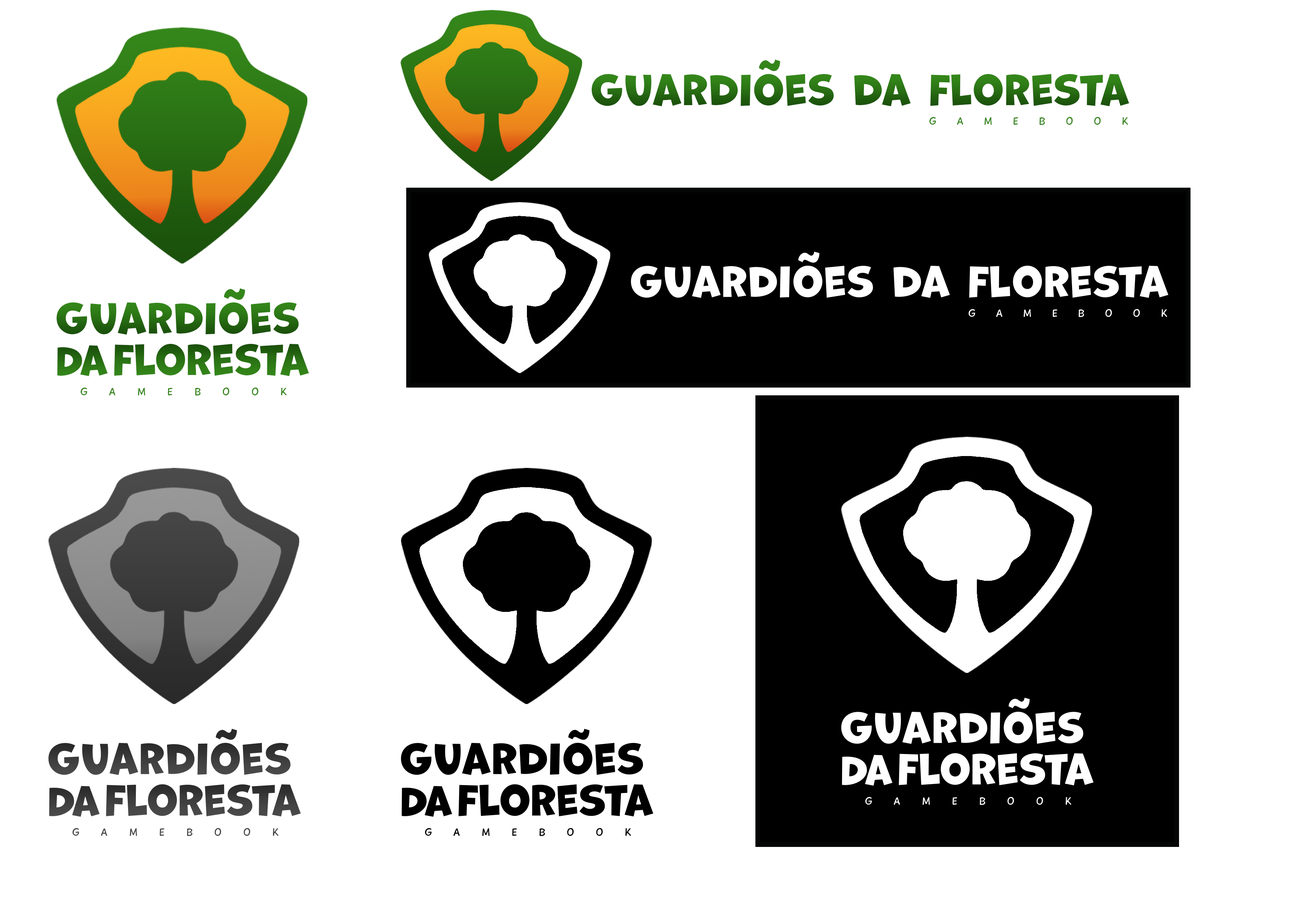
<style>
.page{position:relative;width:1299px;height:918px;background:#ffffff}
.page>*{position:absolute;margin:0}
.t1{font:39.6px "Marvin";letter-spacing:-0.001em;color:#34851a}
.t2{font:39.6px "Marvin";letter-spacing:0.03em;color:#276a12}
.t3{font:39.6px "Marvin";letter-spacing:0.019em;color:#276a12}
.t4{font:10.8px "PlaytimeWithHotToddies";letter-spacing:1.9em;color:#33851a}
.t5{font:6.7px "Venera900";letter-spacing:3.03em;color:#33851a}
.t6{font:39.6px "Marvin";letter-spacing:-0.001em;color:#34861a}
.t7{font:38px "Marvin";letter-spacing:-0.03em;color:#276a12}
.t8{font:39.6px "Marvin";letter-spacing:-0.001em;color:#276a12}
.t9{font:39.6px "Marvin";letter-spacing:0.02em;color:#276a12}
.t10{font:10.8px "PlaytimeWithHotToddies";letter-spacing:2em;color:#33851a}
.t11{font:6.8px "Venera900";letter-spacing:3.03em;color:#33851a}
</style>
<div class="page">
<p class="t1" style="left:759px;top:60px;width:21px;height:11px">~</p>
<p class="t2" style="left:591px;top:74px;width:538px;height:32px">Gua<span class="t3">rd</span>ioes da floresta</p>
<p class="t4" style="left:929px;top:117px;width:199px;height:8px"><span class="t5">  </span>GAMEBOOK</p>
<p class="t6" style="left:224px;top:288px;width:21px;height:12px">~</p>
<p class="t2" style="left:56px;top:302px;width:243px;height:33px">Gua<span class="t3">rd</span>ioes</p>
<p class="t7" style="left:57px;top:345px;width:51px;height:31px">Da</p>
<p class="t8" style="left:114px;top:344px;width:195px;height:32px">Flo<span class="t9">res</span><span class="t3">ta</span></p>
<p class="t10" style="left:80px;top:388px;width:207px;height:8px"><span class="t11">  </span>GAMEBOOK</p>
</div>
